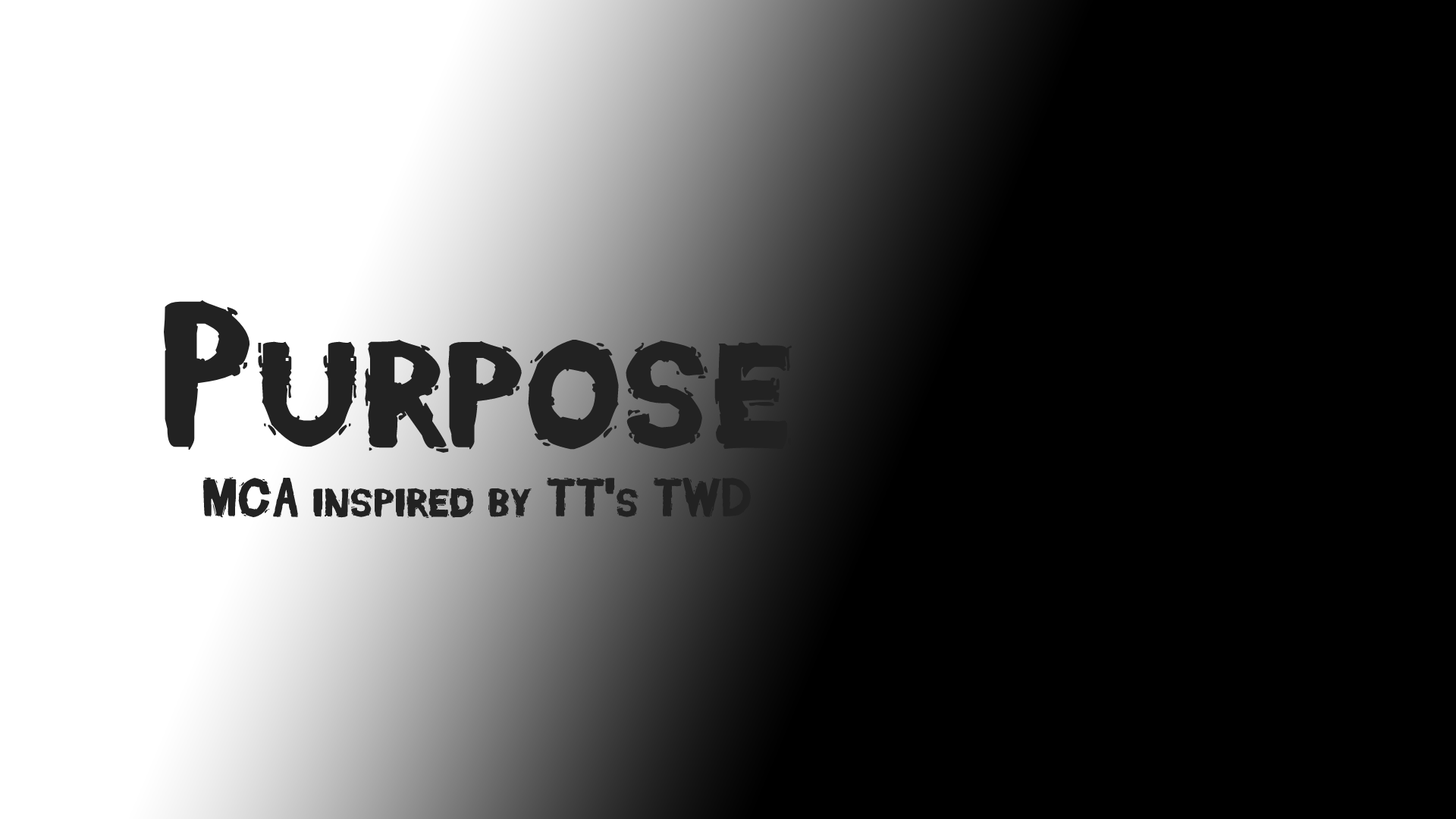
<style>
.page{position:relative;width:1456px;height:819px;background:#000000}
.page>*{position:absolute;margin:0}
.t1{font:208.4px "DeadFontWalking";color:#222222}
.t2{font:55.2px "DeadFontWalking";color:#222222}
</style>
<div class="page">
<p class="t1" style="left:163px;top:300px;width:629px;height:153px">Purpose</p>
<p class="t2" style="left:203px;top:477px;width:548px;height:42px">MCA inspired by TT's TWD</p>
</div>
